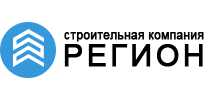
<style>
.page{position:relative;width:213px;height:100px;background:#ffffff}
.page>*{position:absolute;margin:0}
.t1{font:12px "ArialMT";color:#000000;font-weight:bold}
.t2{font:30px "ArialMT";letter-spacing:0.1em;color:#000000;font-weight:bold}
</style>
<div class="page">
<p class="t1" style="left:64px;top:32px;width:140px;height:10px">строительная компания</p>
<p class="t2" style="left:64px;top:44px;width:139px;height:23px">РЕГИОН</p>
</div>
